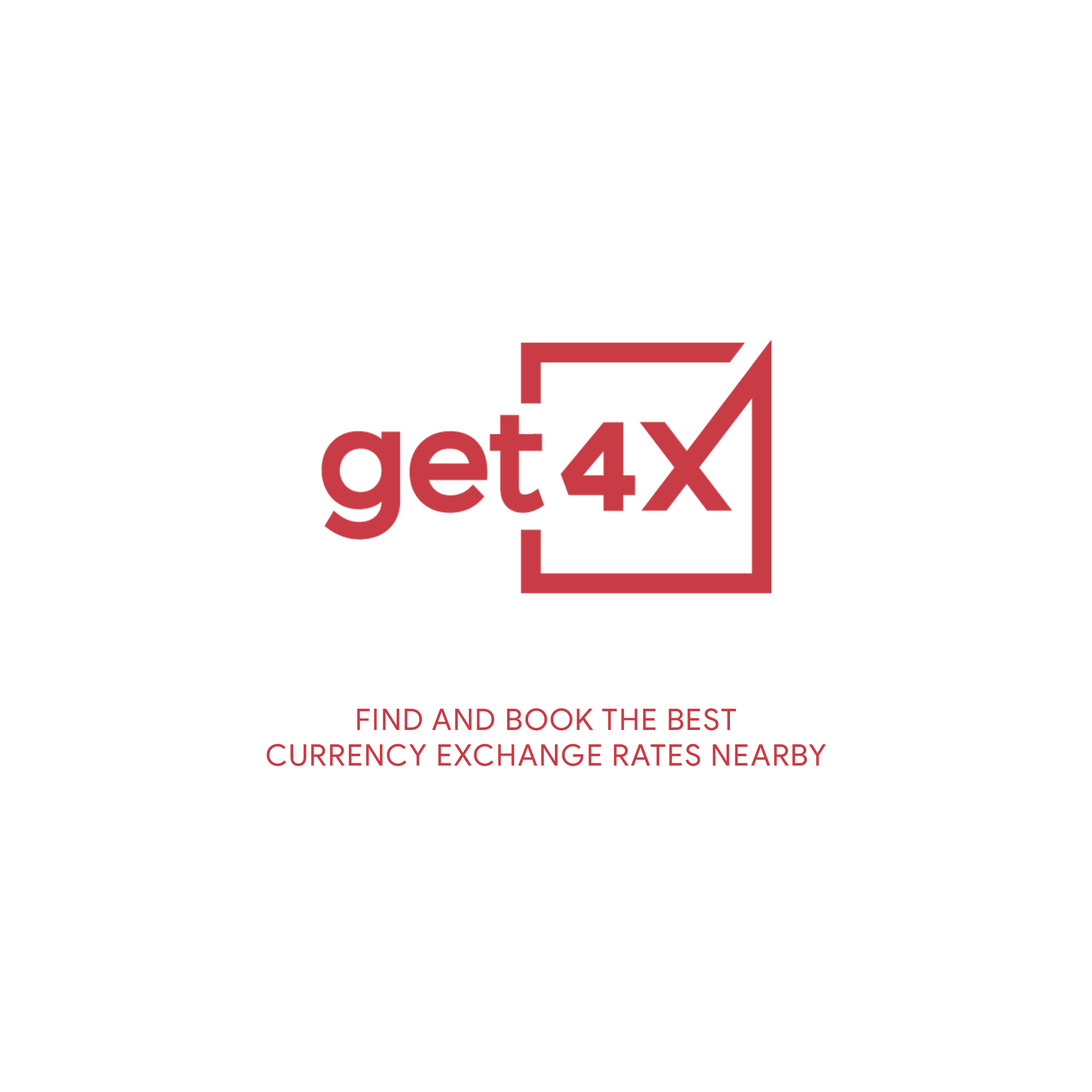
<style>
.page{position:relative;width:1092px;height:1092px;background:#ffffff}
.page>*{position:absolute;margin:0}
.t1{font:29.7px/35.6px "ProductSans-Regular";letter-spacing:0.05em;color:#c93c45;text-transform:uppercase}
</style>
<div class="page">
<p class="t1" style="left:267px;top:708px;width:559px;height:58px;text-align:center">Find and Book the best <br>currency exchange rates nearby</p>
</div>
